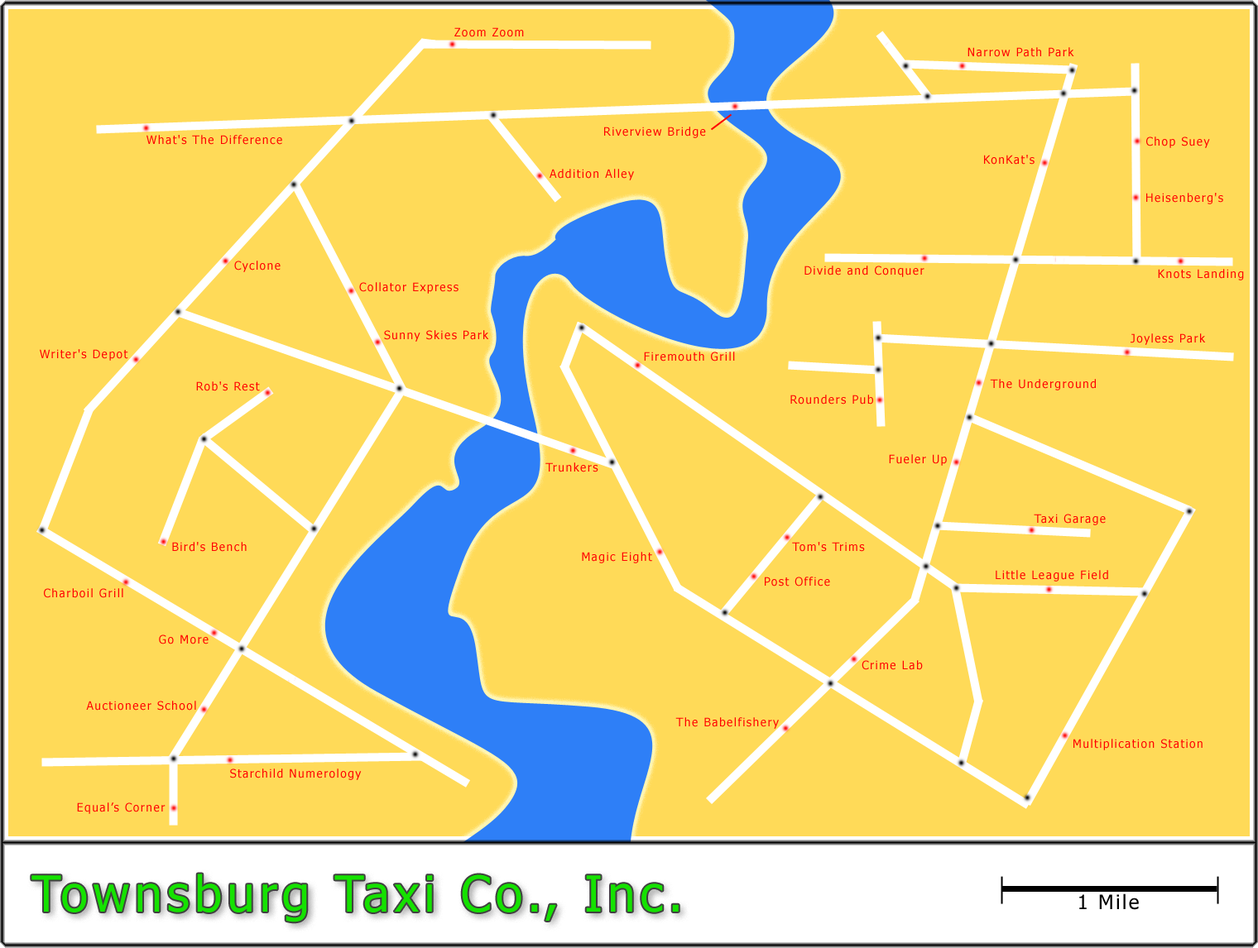
<style>
.page{position:relative;width:1258px;height:948px;background:#ffda58}
.page>*{position:absolute;margin:0}
.t1{font:11.6px "Tahoma";letter-spacing:0.1em;color:#ff0000}
.t2{font:49.6px "Tahoma";letter-spacing:0.1em;color:#15e200}
</style>
<div class="page">
<p class="t1" style="left:454px;top:27px;width:70px;height:10px">Zoom Zoom</p>
<p class="t1" style="left:967px;top:47px;width:107px;height:10px">Narrow Path Park</p>
<p class="t1" style="left:146px;top:135px;width:136px;height:10px">What's The Difference</p>
<p class="t1" style="left:604px;top:127px;width:102px;height:11px">Riverview Bridge</p>
<p class="t1" style="left:1146px;top:137px;width:64px;height:11px">Chop Suey</p>
<p class="t1" style="left:984px;top:155px;width:50px;height:10px">KonKat's</p>
<p class="t1" style="left:549px;top:169px;width:85px;height:11px">Addition Alley</p>
<p class="t1" style="left:1146px;top:193px;width:77px;height:11px">Heisenberg's</p>
<p class="t1" style="left:234px;top:261px;width:46px;height:11px">Cyclone</p>
<p class="t1" style="left:804px;top:266px;width:120px;height:11px">Divide and Conquer</p>
<p class="t1" style="left:1157px;top:269px;width:87px;height:11px">Knots Landing</p>
<p class="t1" style="left:359px;top:282px;width:99px;height:12px">Collator Express</p>
<p class="t1" style="left:384px;top:330px;width:105px;height:12px">Sunny Skies Park</p>
<p class="t1" style="left:1130px;top:333px;width:75px;height:12px">Joyless Park</p>
<p class="t1" style="left:40px;top:349px;width:88px;height:12px">Writer's Depot</p>
<p class="t1" style="left:644px;top:352px;width:91px;height:10px">Firemouth Grill</p>
<p class="t1" style="left:196px;top:381px;width:64px;height:10px">Rob's Rest</p>
<p class="t1" style="left:990px;top:379px;width:105px;height:12px">The Underground</p>
<p class="t1" style="left:790px;top:395px;width:83px;height:10px">Rounders Pub</p>
<p class="t1" style="left:889px;top:454px;width:58px;height:12px">Fueler Up</p>
<p class="t1" style="left:545px;top:463px;width:53px;height:9px">Trunkers</p>
<p class="t1" style="left:1033px;top:514px;width:72px;height:11px">Taxi Garage</p>
<p class="t1" style="left:172px;top:542px;width:75px;height:10px">Bird's Bench</p>
<p class="t1" style="left:792px;top:542px;width:73px;height:10px">Tom's Trims</p>
<p class="t1" style="left:582px;top:552px;width:70px;height:11px">Magic Eight</p>
<p class="t1" style="left:764px;top:577px;width:66px;height:10px">Post Office</p>
<p class="t1" style="left:995px;top:570px;width:113px;height:12px">Little League Field</p>
<p class="t1" style="left:44px;top:588px;width:79px;height:10px">Charboil Grill</p>
<p class="t1" style="left:159px;top:635px;width:49px;height:10px">Go More</p>
<p class="t1" style="left:861px;top:660px;width:62px;height:10px">Crime Lab</p>
<p class="t1" style="left:86px;top:701px;width:110px;height:10px">Auctioneer School</p>
<p class="t1" style="left:675px;top:717px;width:104px;height:12px">The Babelfishery</p>
<p class="t1" style="left:1073px;top:739px;width:129px;height:11px">Multiplication Station</p>
<p class="t1" style="left:230px;top:769px;width:132px;height:11px">Starchild Numerology</p>
<p class="t1" style="left:77px;top:803px;width:88px;height:11px">Equal’s Corner</p>
<p class="t2" style="left:31px;top:874px;width:647px;height:49px">Townsburg Taxi Co., Inc.</p>
</div>
